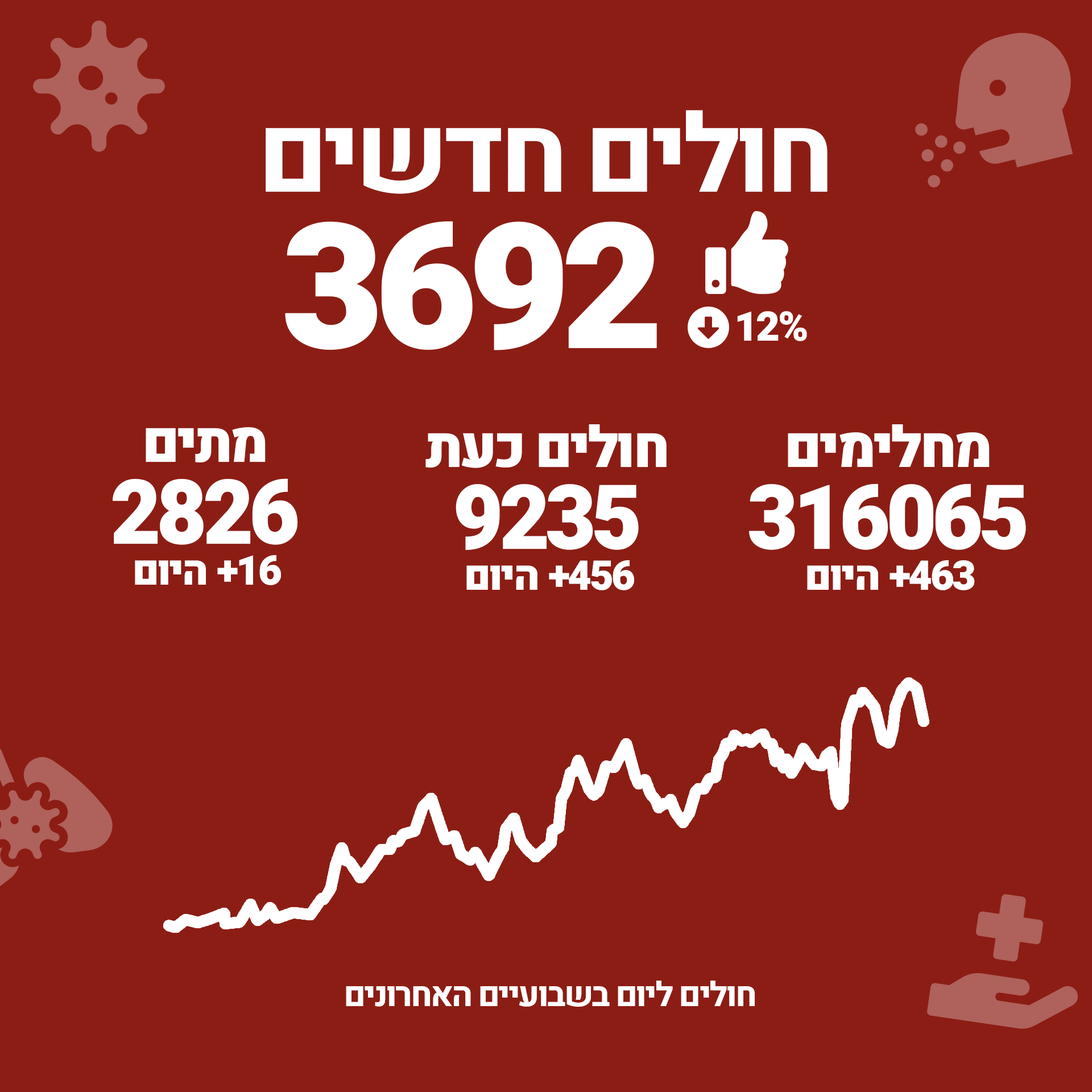
<style>
.page{position:relative;width:1092px;height:1092px;background:#8c1d14}
.page>*{position:absolute;margin:0}
.t1{font:108.5px "Heebo-Bold";letter-spacing:-0.05em;color:#ffffff}
.t2{font:175.3px "Heebo-Black";letter-spacing:-0.05em;color:#ffffff}
.t3{font:40.9px "Heebo-Black";letter-spacing:-0.05em;color:#ffffff}
.t4{font:56.9px "Heebo-Black";letter-spacing:-0.05em;color:#ffffff}
.t5{font:89.8px "Heebo-Black";letter-spacing:-0.05em;color:#ffffff;scale:0.97 1}
.t6{font:89.7px "Heebo-Black";letter-spacing:-0.05em;color:#ffffff;scale:0.97 1}
.t7{font:34px "Heebo-Bold";letter-spacing:-0.05em;color:#ffffff}
</style>
<div class="page">
<p class="t1" style="left:266px;top:110px;width:562px;height:84px">חולים חדשים</p>
<p class="t2" style="left:285px;top:221px;width:372px;height:129px">3692</p>
<p class="t3" style="left:737px;top:311px;width:70px;height:30px">12%</p>
<p class="t4" style="left:425px;top:424px;width:242px;height:44px">חולים כעת</p>
<p class="t4" style="left:788px;top:424px;width:202px;height:43px">מחלימים</p>
<p class="t4" style="left:146px;top:427px;width:120px;height:36px">מתים</p>
<p class="t5" style="left:113px;top:478px;width:185px;height:67px">2826</p>
<p class="t6" style="left:456px;top:484px;width:183px;height:66px">9235</p>
<p class="t6" style="left:749px;top:483px;width:277px;height:67px">316065</p>
<p class="t3" style="left:135px;top:555px;width:146px;height:30px">+16 היום</p>
<p class="t3" style="left:466px;top:560px;width:168px;height:30px">+456 היום</p>
<p class="t3" style="left:807px;top:560px;width:168px;height:30px">+463 היום</p>
<p class="t7" style="left:346px;top:981px;width:409px;height:26px">חולים ליום בשבועיים האחרונים</p>
</div>
